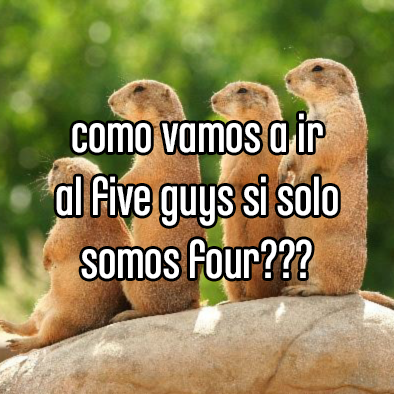
<style>
.page{position:relative;width:394px;height:394px}
.page>*{position:absolute;margin:0}
.t1{font:55.4px "ChaletComprime-CologneEighty";color:#ffffff}
</style>
<div class="page">
<p class="t1" style="left:56px;top:113px;width:282px;height:166px;text-align:center">como vamos a ir<br>al five guys si solo<br>somos four???</p>
</div>
